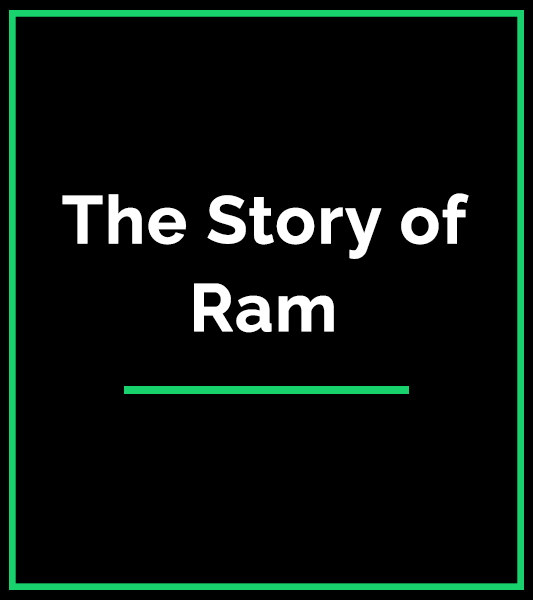
<style>
.page{position:relative;width:533px;height:600px;background:#000000}
.page>*{position:absolute;margin:0}
.t1{font:66.7px/87.9px "Raleway-Bold";color:#ffffff;font-weight:bold}
</style>
<div class="page">
<p class="t1" style="left:62px;top:193px;width:407px;height:140px;text-align:center">The Story of Ram</p>
</div>
